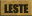
<style>
.page{position:relative;width:32px;height:16px}
.page>*{position:absolute;margin:0}
.t1{font:10.8px "Impact";color:#292110}
</style>
<div class="page">
<p class="t1" style="left:4px;top:4px;width:25px;height:10px">LESTE</p>
</div>
